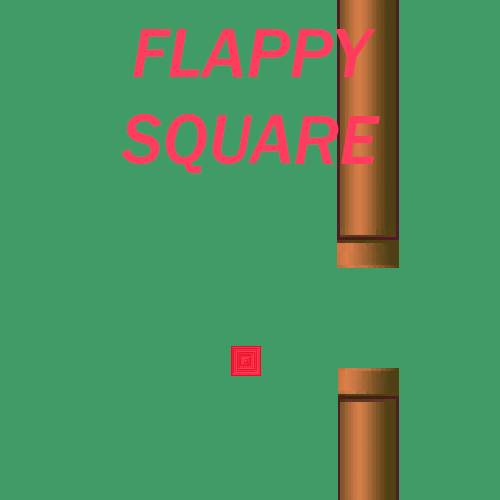
<style>
.page{position:relative;width:500px;height:500px;background:#409b66}
.page>*{position:absolute;margin:0}
.t1{font:72px "FranklinGothic-MediumItalic";color:#ff3c5d}
</style>
<div class="page">
<p class="t1" style="left:121px;top:29px;width:259px;height:145px;text-align:center">FLAPPY<br>SQUARE</p>
</div>
